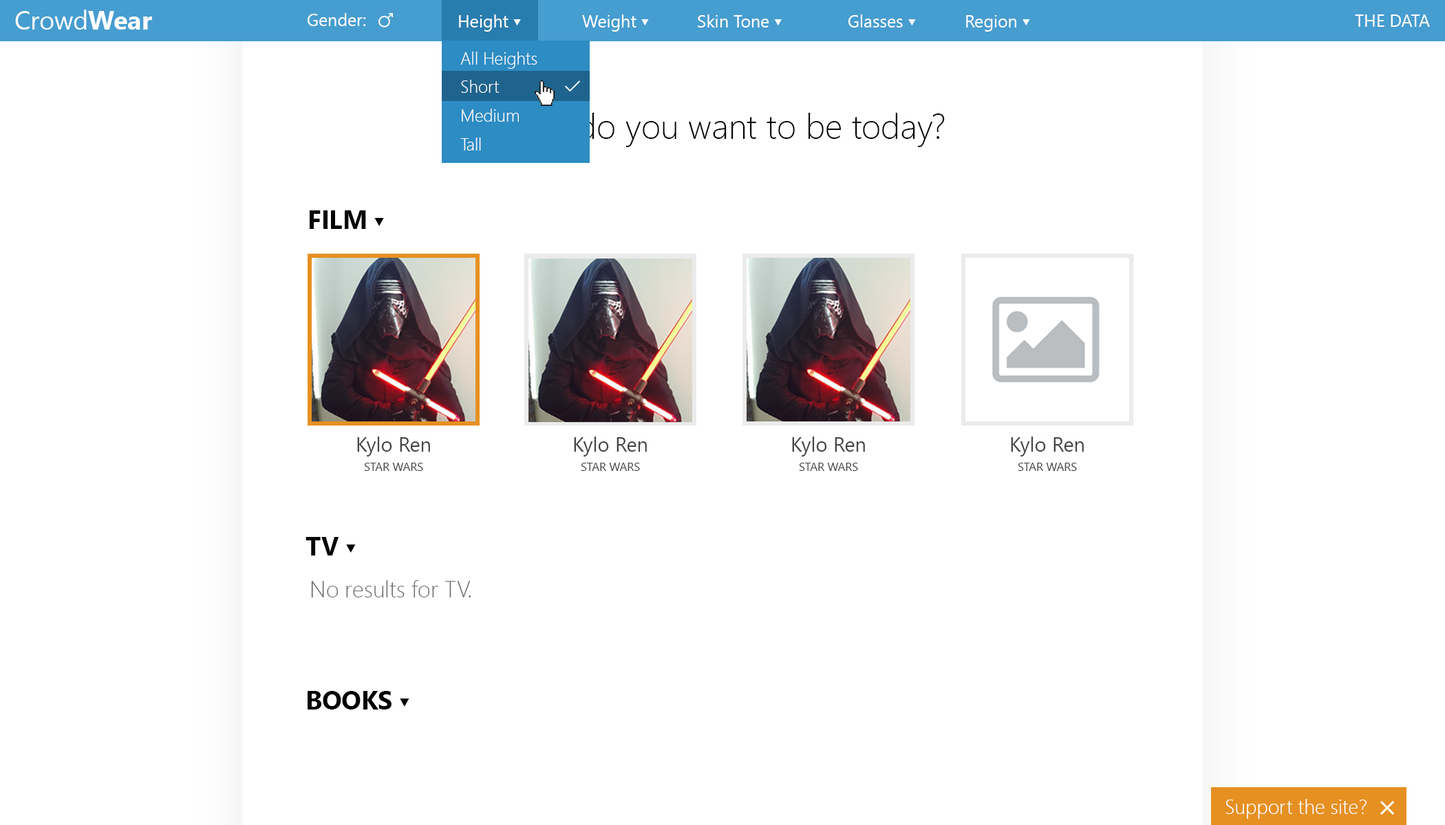
<style>
.page{position:relative;width:1445px;height:825px;background:#ffffff}
.page>*{position:absolute;margin:0}
.t1{font:25.8px "SegoeUI";color:#ffffff}
.t2{font:25.8px "SegoeUI-Bold";color:#ffffff}
.t3{font:17.2px "SegoeUI";color:#ffffff}
.t4{font:8.6px "SegoeUI-Bold";color:#ffffff}
.t5{font:17.2px/28.7px "SegoeUI-Light";color:#ffffff}
.t6{font:34.4px "SegoeUI-Light";color:#030303}
.t7{font:25.8px "SegoeUI-Bold";color:#030303}
.t8{font:11.5px "SegoeUI-Bold";color:#030303}
.t9{font:11.5px "SegoeUI";color:#444444}
.t10{font:20.1px "SegoeUI";color:#444444}
.t11{font:22.9px "SegoeUI-Light";color:#6e6e6e}
.t12{font:20.1px "SegoeUI-Light";color:#ffffff}
</style>
<div class="page">
<p class="t1" style="left:15px;top:10px;width:137px;height:20px">Crowd<span class="t2">Wear</span></p>
<p class="t3" style="left:307px;top:13px;width:59px;height:13px">Gender:</p>
<p class="t3" style="left:459px;top:14px;width:62px;height:18px">Height <span class="t4">▼</span></p>
<p class="t3" style="left:582px;top:14px;width:67px;height:18px">Weight <span class="t4">▼</span></p>
<p class="t3" style="left:698px;top:14px;width:83px;height:14px">Skin Tone <span class="t4">▼</span></p>
<p class="t3" style="left:848px;top:14px;width:68px;height:14px">Glasses <span class="t4">▼</span></p>
<p class="t3" style="left:966px;top:15px;width:64px;height:17px">Region <span class="t4">▼</span></p>
<p class="t3" style="left:1354px;top:14px;width:75px;height:13px">THE DATA</p>
<p class="t5" style="left:460px;top:52px;width:77px;height:99px">All Heights<br>Short<br>Medium<br>Tall</p>
<p class="t6" style="left:500px;top:113px;width:444px;height:34px">Who do you want to be today?</p>
<p class="t7" style="left:310px;top:210px;width:74px;height:19px">FILM <span class="t8">▼</span></p>
<p class="t9" style="left:357px;top:437px;width:73px;height:34px;text-align:center"><span class="t10">Kylo Ren<br></span>STAR WARS</p>
<p class="t9" style="left:574px;top:437px;width:73px;height:34px;text-align:center"><span class="t10">Kylo Ren<br></span>STAR WARS</p>
<p class="t9" style="left:792px;top:437px;width:73px;height:34px;text-align:center"><span class="t10">Kylo Ren<br></span>STAR WARS</p>
<p class="t9" style="left:1011px;top:437px;width:72px;height:34px;text-align:center"><span class="t10">Kylo Ren<br></span>STAR WARS</p>
<p class="t7" style="left:305px;top:537px;width:51px;height:19px">TV <span class="t8">▼</span></p>
<p class="t11" style="left:311px;top:581px;width:160px;height:17px">No results for TV.</p>
<p class="t7" style="left:307px;top:691px;width:102px;height:19px">BOOKS <span class="t8">▼</span></p>
<p class="t12" style="left:1225px;top:799px;width:141px;height:20px">Support the site?</p>
</div>
